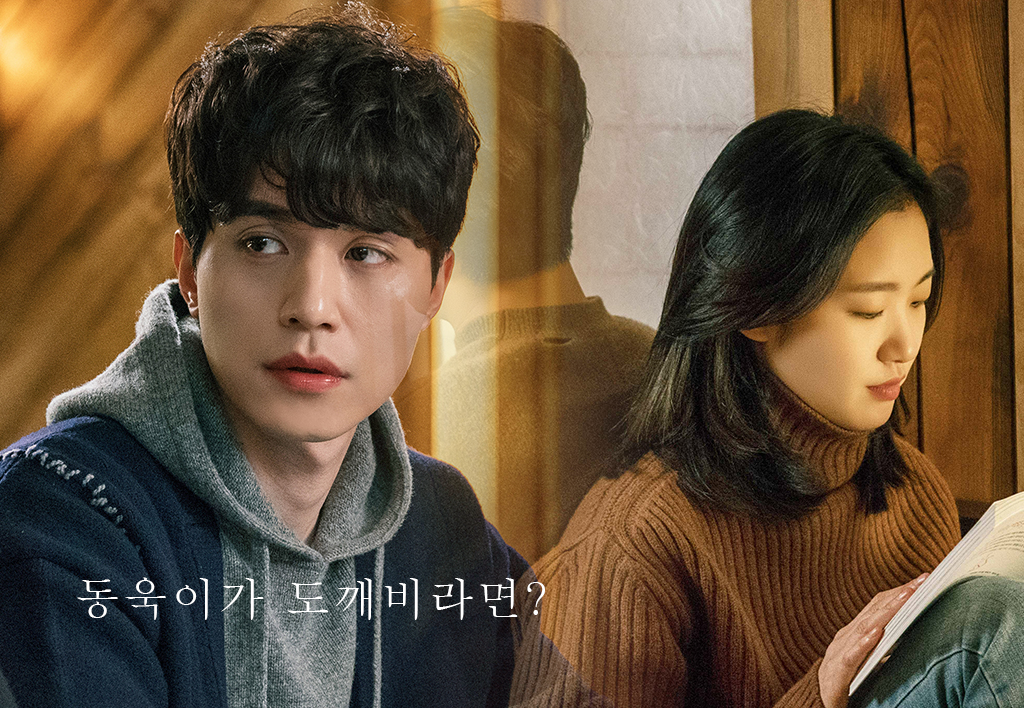
<style>
.page{position:relative;width:1024px;height:708px}
.page>*{position:absolute;margin:0}
.t1{font:45.3px "Batang";letter-spacing:0.06em;color:#ffffff}
</style>
<div class="page">
<p class="t1" style="left:77px;top:577px;width:468px;height:43px">동욱이가 도깨비라면?</p>
</div>
